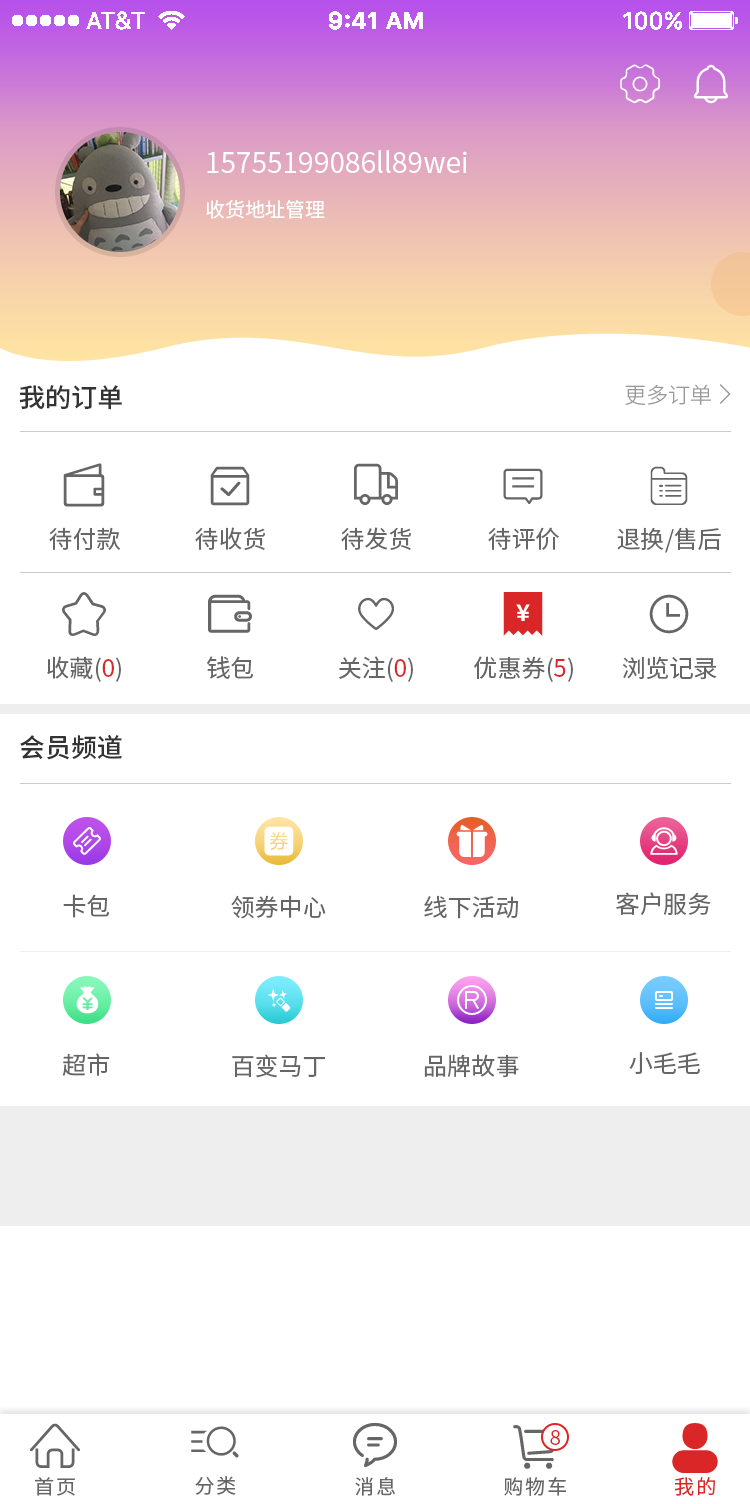
<style>
.page{position:relative;width:750px;height:1504px;background:#ffffff}
.page>*{position:absolute;margin:0}
.t1{font:28px "SourceHanSansCN-Regular";color:#ffffff}
.t2{font:20px "SourceHanSansCN-Regular";color:#ffffff}
.t3{font:26px "SourceHanSansCN-Medium";color:#333333}
.t4{font:22px "SourceHanSansCN-Light";color:#999999}
.t5{font:24px "SourceHanSansCN-Regular";color:#666666}
.t6{font:24px "SourceHanSansCN-Regular";color:#da2626}
.t7{font:20px "SourceHanSansCN-Normal";color:#da2626}
.t8{font:20px "SourceHanSansCN-Regular";letter-spacing:0.1em;color:#666666}
.t9{font:20px "SourceHanSansCN-Regular";letter-spacing:0.1em;color:#da2626}
</style>
<div class="page">
<p class="t1" style="left:207px;top:150px;width:260px;height:23px">15755199086ll89wei</p>
<p class="t2" style="left:206px;top:200px;width:119px;height:19px">收货地址管理</p>
<p class="t3" style="left:19px;top:385px;width:103px;height:25px">我的订单</p>
<p class="t4" style="left:625px;top:384px;width:86px;height:21px">更多订单</p>
<p class="t5" style="left:49px;top:527px;width:72px;height:23px">待付款</p>
<p class="t5" style="left:195px;top:527px;width:70px;height:23px">待收货</p>
<p class="t5" style="left:341px;top:527px;width:70px;height:23px">待发货</p>
<p class="t5" style="left:488px;top:527px;width:71px;height:23px">待评价</p>
<p class="t5" style="left:617px;top:527px;width:104px;height:26px">退换/售后</p>
<p class="t5" style="left:47px;top:656px;width:74px;height:26px">收藏(<span class="t6">0</span>)</p>
<p class="t5" style="left:207px;top:656px;width:46px;height:23px">钱包</p>
<p class="t5" style="left:339px;top:656px;width:74px;height:26px">关注(<span class="t6">0</span>)</p>
<p class="t5" style="left:474px;top:656px;width:99px;height:26px">优惠券(<span class="t6">5</span>)</p>
<p class="t5" style="left:622px;top:656px;width:95px;height:24px">浏览记录</p>
<p class="t3" style="left:20px;top:735px;width:102px;height:25px">会员频道</p>
<p class="t5" style="left:63px;top:894px;width:46px;height:24px">卡包</p>
<p class="t5" style="left:616px;top:892px;width:95px;height:23px">客户服务</p>
<p class="t5" style="left:231px;top:895px;width:95px;height:24px">领券中心</p>
<p class="t5" style="left:424px;top:895px;width:94px;height:24px">线下活动</p>
<p class="t5" style="left:62px;top:1053px;width:48px;height:23px">超市</p>
<p class="t5" style="left:232px;top:1054px;width:93px;height:24px">百变马丁</p>
<p class="t5" style="left:424px;top:1054px;width:95px;height:24px">品牌故事</p>
<p class="t5" style="left:629px;top:1052px;width:71px;height:22px">小毛毛</p>
<p class="t7" style="left:550px;top:1430px;width:10px;height:15px">8</p>
<p class="t8" style="left:35px;top:1477px;width:40px;height:19px">首页</p>
<p class="t8" style="left:195px;top:1476px;width:41px;height:19px">分类</p>
<p class="t8" style="left:355px;top:1477px;width:40px;height:19px">消息</p>
<p class="t8" style="left:504px;top:1477px;width:63px;height:19px">购物车</p>
<p class="t9" style="left:674px;top:1477px;width:41px;height:19px">我的</p>
</div>
